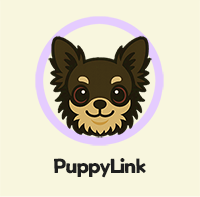
<style>
.page{position:relative;width:200px;height:197px;background:#f8f6de}
.page>*{position:absolute;margin:0}
.t1{font:24.1px "TTPinkfongBabySharkB";letter-spacing:-0.05em;color:#1f1f1f}
</style>
<div class="page">
<p class="t1" style="left:54px;top:158px;width:92px;height:20px">PuppyLink</p>
</div>
